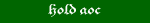
<style>
.page{position:relative;width:150px;height:23px;background:#006600}
.page>*{position:absolute;margin:0}
.t1{font:24px "Parchment-Regular";color:#fbfbfa;scale:1.56 1}
</style>
<div class="page">
<p class="t1" style="left:48px;top:4px;width:53px;height:13px">hold aoc</p>
</div>
